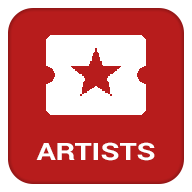
<style>
.page{position:relative;width:192px;height:192px;background:#b71c1c}
.page>*{position:absolute;margin:0}
.t1{font:24px "Roboto-Bold";color:#ffffff;scale:1.25 1}
</style>
<div class="page">
<p class="t1" style="left:36px;top:142px;width:119px;height:19px">ARTISTS</p>
</div>
